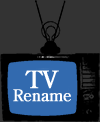
<style>
.page{position:relative;width:100px;height:122px;background:#333333}
.page>*{position:absolute;margin:0}
.t1{font:16px/13.3px "CenturyOldStyleStd-Regular";color:#ffffff;font-weight:bold}
.t2{font:24px/13.3px "CenturyOldStyleStd-Regular";color:#ffffff;font-weight:bold}
</style>
<div class="page">
<p class="t1" style="left:13px;top:70px;width:58px;height:32px;text-align:center"><span class="t2">TV<br></span>Rename</p>
</div>
